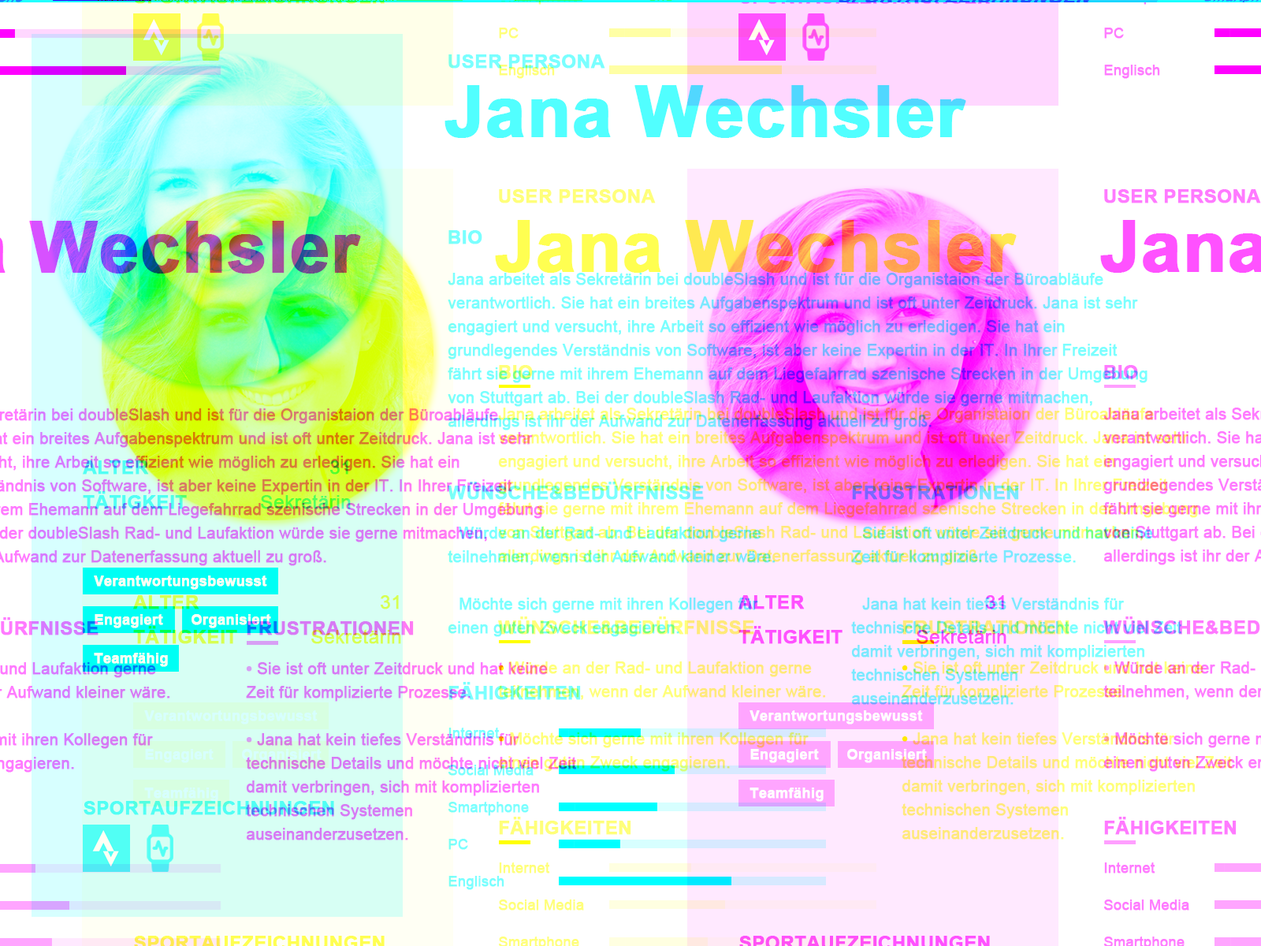
<style>
.page{position:relative;width:1261px;height:946px;background:#ffffff}
.page>*{position:absolute;margin:0}
.t1{font:70.9px "Arial-BoldMT";color:#51ffff;font-weight:bold}
.t2{font:15.8px/23.6px "ArialMT";font-weight:bold}
.t3{font:18.9px "Arial-BoldMT";font-weight:bold}
.t4{font:18.9px "ArialMT";font-weight:bold}
.t5{font:15.8px/23.6px "Arial-BoldMT";font-weight:bold}
.t6{font:14.2px "Arial-BoldMT";font-weight:bold}
.t7{font:14.2px/37px "ArialMT";font-weight:bold}
</style>
<div class="page">
<p class="t1" style="left:444px;top:83px;width:522px;height:53px">Jana Wechsler</p>
<p class="t2" style="left:448px;top:270px;width:699px;height:158px">Jana arbeitet als Sekretärin bei doubleSlash und ist für die Organistaion der Büroabläufe verantwortlich. Sie hat ein breites Aufgabenspektrum und ist oft unter Zeitdruck. Jana ist sehr engagiert und versucht, ihre Arbeit so effizient wie möglich zu erledigen. Sie hat ein grundlegendes Verständnis von Software, ist aber keine Expertin in der IT. In Ihrer Freizeit fährt sie gerne mit ihrem Ehemann auf dem Liegefahrrad szenische Strecken in der Umgebung von Stuttgart ab. Bei der doubleSlash Rad- und Laufaktion würde sie gerne mitmachen, allerdings ist ihr der Aufwand zur Datenerfassung aktuell zu groß.</p>
<p class="t3" style="left:83px;top:458px;width:104px;height:49px">ALTER<br>TÄTIGKEIT</p>
<p class="t4" style="left:261px;top:458px;width:90px;height:49px;text-align:right">31<br>Sekretärin</p>
<p class="t3" style="left:448px;top:479px;width:256px;height:18px">WÜNSCHE&amp;BEDÜRFNISSE</p>
<p class="t3" style="left:852px;top:483px;width:167px;height:14px">FRUSTRATIONEN</p>
<p class="t2" style="left:448px;top:524px;width:327px;height:110px"><span class="t5">•</span> Würde an der Rad- und Laufaktion gerne teilnehmen, wenn der Aufwand kleiner wäre.<br><br><span class="t5">•</span> Möchte sich gerne mit ihren Kollegen für einen guten Zweck engagieren.</p>
<p class="t2" style="left:851px;top:524px;width:330px;height:178px"><span class="t5">•</span> Sie ist oft unter Zeitdruck und hat keine Zeit für komplizierte Prozesse.<br><br><span class="t5">•</span> Jana hat kein tiefes Verständnis für technische Details und möchte nicht viel Zeit damit verbringen, sich mit komplizierten technischen Systemen auseinanderzusetzen.</p>
<p class="t6" style="left:94px;top:650px;width:74px;height:14px">Teamfähig</p>
<p class="t3" style="left:448px;top:679px;width:133px;height:18px">FÄHIGKEITEN</p>
<p class="t7" style="left:448px;top:725px;width:86px;height:162px">Internet<br>Social Media<br>Smartphone<br>PC<br>Englisch</p>
</div>
